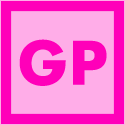
<style>
.page{position:relative;width:125px;height:125px;background:#ffade8}
.page>*{position:absolute;margin:0}
.t1{font:58.3px "Futura-Bold";color:#ff00b9}
</style>
<div class="page">
<p class="t1" style="left:19px;top:39px;width:88px;height:47px">GP</p>
</div>
